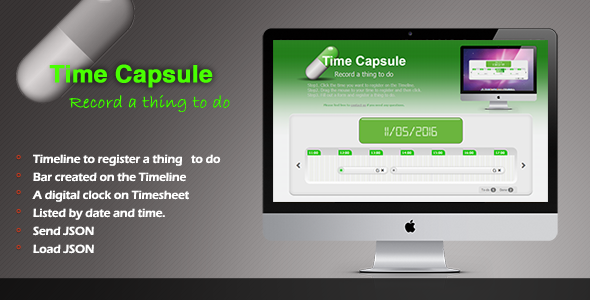
<style>
.page{position:relative;width:590px;height:300px}
.page>*{position:absolute;margin:0}
.t1{font:18px "BradleyHandITC";color:#48ff00;font-weight:bold}
.t2{font:18px "BradleyHandITC";color:#49ff01;font-weight:bold}
.t3{font:12px/18px "ErasITC-Demi";letter-spacing:-0.01em;color:#ffffff}
</style>
<div class="page">
<p class="t1" style="left:69px;top:95px;width:161px;height:17px">Record a thing to do</p>
<p class="t2" style="left:69px;top:95px;width:161px;height:17px">Record a thing to do</p>
<p class="t3" style="left:32px;top:154px;width:189px;height:100px">Timeline to register a thing   to do<br>Bar created on the Timeline<br>A digital clock on Timesheet<br>Listed by date and time.<br>Send JSON<br>Load JSON</p>
</div>
